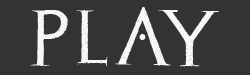
<style>
.page{position:relative;width:250px;height:75px;background:#333333}
.page>*{position:absolute;margin:0}
.t1{font:66.7px "Archeologicaps";color:#f7f7f7}
</style>
<div class="page">
<p class="t1" style="left:30px;top:7px;width:189px;height:60px">play</p>
</div>
